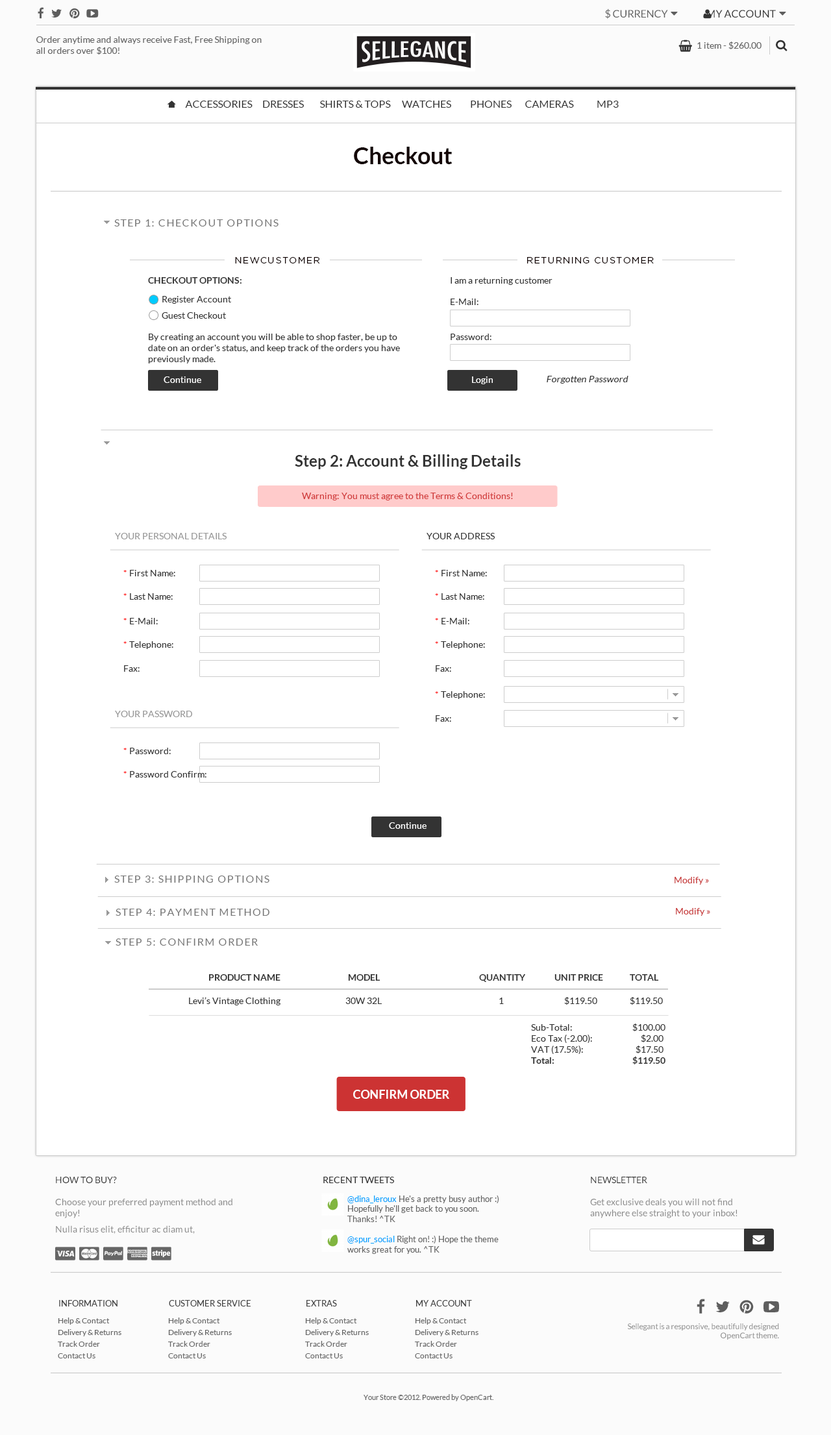
<style>
.page{position:relative;width:831px;height:1435px;background:#ffffff}
.page>*{position:absolute;margin:0}
.t1{font:10.4px "Lato-Regular";color:#5e5e5e;text-transform:uppercase}
.t2{font:10.4px "Lato-Regular";color:#333333;text-transform:uppercase}
.t3{font:9.1px "Lato-Regular";color:#666666}
.t4{font:23.4px "Lato-Bold";color:#140606}
.t5{font:10.4px "Lato-Regular";letter-spacing:0.1em;color:#777777;text-transform:uppercase}
.t6{font:9.1px "Gotham-Book";letter-spacing:0.1em;color:#140606}
.t7{font:9.1px "Lato-Bold";color:#333333;text-transform:uppercase}
.t8{font:9.1px "Lato-Regular";color:#333333}
.t9{font:9.1px "Lato-Regular";color:#ffffff}
.t10{font:9.1px "Lato-Regular";color:#333333;font-style:italic}
.t11{font:15.6px "Lato-Bold";color:#333333}
.t12{font:9.1px "Lato-Regular";color:#d13b3b}
.t13{font:9.1px "Lato-Regular";color:#999999}
.t14{font:9.1px "Lato-Regular";color:#ff0000}
.t15{font:9.1px "Lato-Regular";color:#c83838}
.t16{font:9.1px "Lato-Bold";color:#333333}
.t17{font:11.7px "Lato-Bold";color:#ffffff;text-transform:uppercase}
.t18{font:9.1px "Lato-Regular";color:#878787}
.t19{font:8.4px "Lato-Regular";color:#666666}
.t20{font:8.4px "Lato-Regular";color:#00a2ff}
.t21{font:8.4px "Lato-Regular";color:#434343}
.t22{font:7.8px/11.7px "Lato-Regular";color:#666666}
.t23{font:7.8px "Lato-Regular";color:#878787}
.t24{font:7.1px "Lato-Regular";color:#636363}
</style>
<div class="page">
<p class="t1" style="left:605px;top:8px;width:63px;height:11px">$ currency</p>
<p class="t2" style="left:707px;top:10px;width:69px;height:8px">My Account</p>
<p class="t3" style="left:36px;top:36px;width:226px;height:19px">Order anytime and always receive Fast, Free Shipping on all orders over $100!</p>
<p class="t3" style="left:697px;top:42px;width:64px;height:7px">1 item - $260.00</p>
<p class="t2" style="left:185px;top:101px;width:68px;height:7px">accessories</p>
<p class="t2" style="left:263px;top:101px;width:41px;height:7px">dresses</p>
<p class="t2" style="left:320px;top:101px;width:71px;height:7px">shirts &amp; tops</p>
<p class="t2" style="left:402px;top:101px;width:49px;height:7px">watches</p>
<p class="t2" style="left:471px;top:101px;width:40px;height:7px">Phones</p>
<p class="t2" style="left:525px;top:101px;width:49px;height:7px">Cameras</p>
<p class="t2" style="left:597px;top:101px;width:22px;height:7px">MP3</p>
<p class="t4" style="left:354px;top:147px;width:98px;height:17px">Checkout</p>
<p class="t5" style="left:114px;top:219px;width:164px;height:8px">Step 1: Checkout Options</p>
<p class="t6" style="left:235px;top:257px;width:85px;height:7px">NEWCUSTOMER</p>
<p class="t6" style="left:527px;top:257px;width:127px;height:7px">RETURNING CUSTOMER</p>
<p class="t7" style="left:148px;top:277px;width:93px;height:7px">Checkout Options:</p>
<p class="t8" style="left:450px;top:277px;width:102px;height:8px">I am a returning customer</p>
<p class="t8" style="left:162px;top:296px;width:69px;height:8px">Register Account</p>
<p class="t8" style="left:450px;top:299px;width:28px;height:6px">E-Mail:</p>
<p class="t8" style="left:162px;top:312px;width:64px;height:7px">Guest Checkout</p>
<p class="t8" style="left:148px;top:334px;width:252px;height:30px">By creating an account you will be able to shop faster, be up to date on an order's status, and keep track of the orders you have previously made.</p>
<p class="t8" style="left:450px;top:334px;width:41px;height:6px">Password:</p>
<p class="t9" style="left:164px;top:376px;width:37px;height:7px">Continue</p>
<p class="t9" style="left:472px;top:376px;width:21px;height:8px">Login</p>
<p class="t10" style="left:547px;top:376px;width:81px;height:8px">Forgotten Password</p>
<p class="t11" style="left:295px;top:454px;width:226px;height:15px">Step 2: Account &amp; Billing Details</p>
<p class="t12" style="left:302px;top:493px;width:211px;height:7px">Warning: You must agree to the Terms &amp; Conditions!</p>
<p class="t13" style="left:115px;top:533px;width:112px;height:6px">YOUR PERSONAL DETAILS</p>
<p class="t8" style="left:426px;top:533px;width:69px;height:6px">YOUR ADDRESS</p>
<p class="t8" style="left:123px;top:570px;width:52px;height:6px"><span class="t14">* </span>First Name:</p>
<p class="t8" style="left:435px;top:570px;width:52px;height:6px"><span class="t14">* </span>First Name:</p>
<p class="t8" style="left:123px;top:593px;width:50px;height:7px"><span class="t14">* </span>Last Name:</p>
<p class="t8" style="left:435px;top:593px;width:49px;height:7px"><span class="t14">* </span>Last Name:</p>
<p class="t8" style="left:123px;top:618px;width:35px;height:6px"><span class="t14">* </span>E-Mail:</p>
<p class="t8" style="left:435px;top:618px;width:34px;height:6px"><span class="t14">* </span>E-Mail:</p>
<p class="t8" style="left:123px;top:641px;width:50px;height:8px"><span class="t14">* </span>Telephone:</p>
<p class="t8" style="left:435px;top:641px;width:50px;height:8px"><span class="t14">* </span>Telephone:</p>
<p class="t8" style="left:124px;top:665px;width:16px;height:7px">Fax:</p>
<p class="t8" style="left:436px;top:665px;width:15px;height:7px">Fax:</p>
<p class="t8" style="left:435px;top:691px;width:50px;height:8px"><span class="t14">* </span>Telephone:</p>
<p class="t13" style="left:115px;top:711px;width:77px;height:6px">YOUR PASSWORD</p>
<p class="t8" style="left:436px;top:715px;width:15px;height:7px">Fax:</p>
<p class="t8" style="left:123px;top:748px;width:48px;height:6px"><span class="t14">* </span>Password:</p>
<p class="t8" style="left:123px;top:771px;width:83px;height:7px"><span class="t14">* </span>Password Confirm:</p>
<p class="t9" style="left:389px;top:822px;width:37px;height:7px">Continue</p>
<p class="t5" style="left:114px;top:876px;width:155px;height:7px">Step 3: Shipping Options</p>
<p class="t15" style="left:674px;top:877px;width:35px;height:8px">Modify »</p>
<p class="t5" style="left:116px;top:909px;width:153px;height:7px">Step 4: Payment Method</p>
<p class="t15" style="left:676px;top:908px;width:34px;height:8px">Modify »</p>
<p class="t5" style="left:116px;top:939px;width:142px;height:7px">Step 5: Confirm Order</p>
<p class="t16" style="left:209px;top:974px;width:71px;height:7px">PRODUCT NAME</p>
<p class="t16" style="left:348px;top:974px;width:32px;height:7px">MODEL</p>
<p class="t16" style="left:479px;top:974px;width:46px;height:8px">QUANTITY</p>
<p class="t16" style="left:554px;top:974px;width:49px;height:7px">UNIT PRICE</p>
<p class="t16" style="left:630px;top:974px;width:29px;height:7px">TOTAL</p>
<p class="t8" style="left:189px;top:997px;width:92px;height:8px">Levi’s Vintage Clothing</p>
<p class="t8" style="left:345px;top:998px;width:37px;height:6px">30W 32L</p>
<p class="t8" style="left:499px;top:998px;width:5px;height:6px">1</p>
<p class="t8" style="left:564px;top:997px;width:33px;height:8px">$119.50</p>
<p class="t8" style="left:630px;top:997px;width:33px;height:8px">$119.50</p>
<p class="t8" style="left:531px;top:1024px;width:134px;height:41px;text-align:right">Sub-Total: $100.00<br>Eco Tax (-2.00): $2.00<br>VAT (17.5%): $17.50<br><span class="t16">Total: $119.50</span></p>
<p class="t17" style="left:353px;top:1090px;width:96px;height:9px">confirm order</p>
<p class="t18" style="left:55px;top:1177px;width:177px;height:57px"><span class="t8">HOW TO BUY?<br></span><br>Choose your preferred payment method and enjoy!<br>Nulla risus elit, efficitur ac diam ut, sollicitudin bibendum lorem. Vivamus quis sem metus.</p>
<p class="t8" style="left:323px;top:1177px;width:71px;height:6px">RECENT TWEETS</p>
<p class="t18" style="left:590px;top:1177px;width:147px;height:41px"><span class="t8">NEWSLETTER<br></span><br>Get exclusive deals you will not find anywhere else straight to your inbox!</p>
<p class="t19" style="left:347px;top:1195px;width:152px;height:59px"><span class="t20">@dina_leroux </span>He's a pretty busy author :) Hopefully he'll get back to you soon. Thanks! ^TK<br><br><span class="t20">@spur_social </span>Right on! :) Hope the theme works great for you. ^TK</p>
<p class="t21" style="left:59px;top:1300px;width:58px;height:7px">INFORMATION</p>
<p class="t21" style="left:169px;top:1300px;width:82px;height:7px">CUSTOMER SERVICE</p>
<p class="t21" style="left:306px;top:1300px;width:31px;height:7px">EXTRAS</p>
<p class="t21" style="left:416px;top:1300px;width:56px;height:7px">MY ACCOUNT</p>
<p class="t22" style="left:58px;top:1318px;width:63px;height:41px">Help &amp; Contact<br>Delivery &amp; Returns<br>Track Order<br>Contact Us</p>
<p class="t22" style="left:168px;top:1318px;width:64px;height:41px">Help &amp; Contact<br>Delivery &amp; Returns<br>Track Order<br>Contact Us</p>
<p class="t22" style="left:305px;top:1318px;width:64px;height:41px">Help &amp; Contact<br>Delivery &amp; Returns<br>Track Order<br>Contact Us</p>
<p class="t22" style="left:415px;top:1318px;width:63px;height:41px">Help &amp; Contact<br>Delivery &amp; Returns<br>Track Order<br>Contact Us</p>
<p class="t23" style="left:628px;top:1324px;width:151px;height:16px;text-align:right">Sellegant is a responsive, beautifully designed OpenCart theme.</p>
<p class="t24" style="left:364px;top:1394px;width:129px;height:7px">Your Store ©2012. Powered by OpenCart.</p>
</div>
